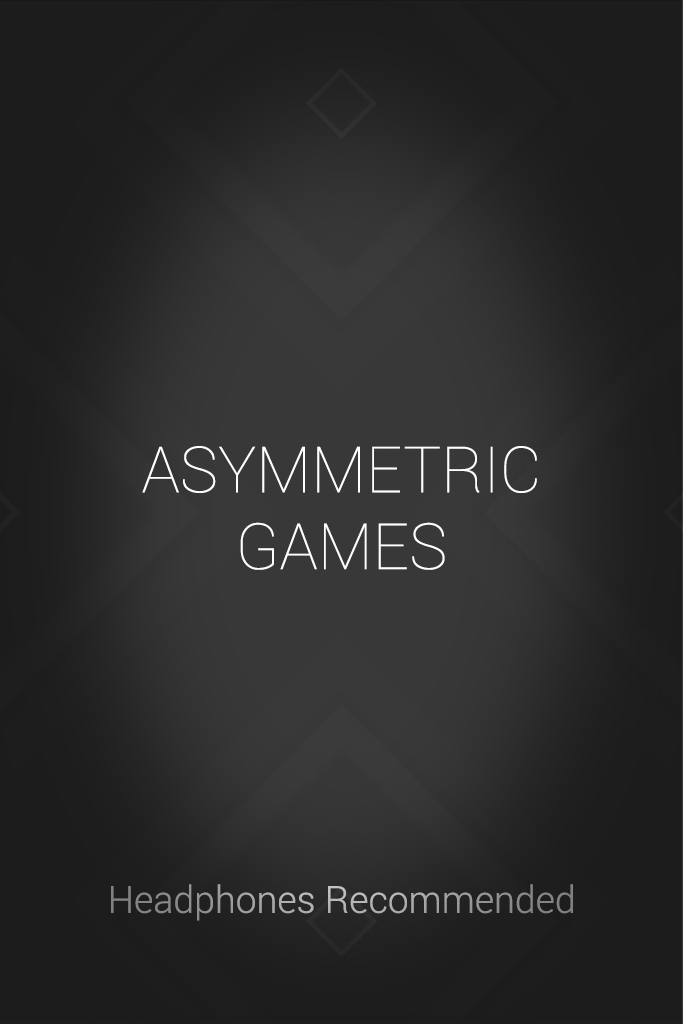
<style>
.page{position:relative;width:683px;height:1024px}
.page>*{position:absolute;margin:0}
.t1{font:64px "Roboto-Thin";color:#ffffff}
.t2{font:37.3px "Roboto-Light"}
</style>
<div class="page">
<p class="t1" style="left:142px;top:446px;width:395px;height:124px;text-align:center">ASYMMETRIC<br>GAMES</p>
<p class="t2" style="left:111px;top:884px;width:462px;height:37px">Headphones Recommended</p>
</div>
